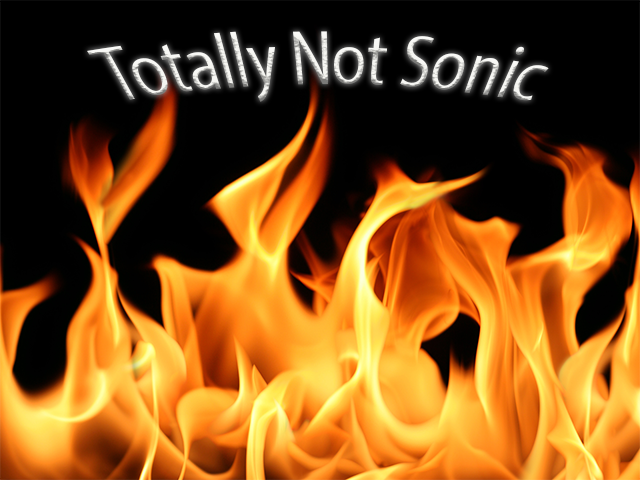
<style>
.page{position:relative;width:640px;height:480px;background:#000000}
.page>*{position:absolute;margin:0}
.t1{font:59.7px "MyriadPro-Regular";color:#f1f1eb;scale:0.89 1}
</style>
<div class="page">
<p class="t1" style="left:87px;top:31px;width:462px;height:71px">Totally Not Sonic</p>
</div>
